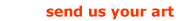
<style>
.page{position:relative;width:188px;height:21px;background:#ffffff}
.page>*{position:absolute;margin:0}
.t1{font:14px "Verdana-Bold";color:#ff3300}
</style>
<div class="page">
<p class="t1" style="left:46px;top:5px;width:128px;height:15px">send us your art</p>
</div>
